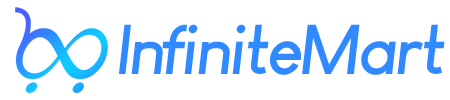
<style>
.page{position:relative;width:450px;height:100px;background:#ffffff}
.page>*{position:absolute;margin:0}
.t1{font:69px "LouisGeorgeCafe-BoldItalic";letter-spacing:-0.04em;color:#3089ff}
</style>
<div class="page">
<p class="t1" style="left:119px;top:24px;width:326px;height:51px">InfiniteMart</p>
</div>
